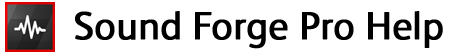
<style>
.page{position:relative;width:462px;height:54px;background:#ffffff}
.page>*{position:absolute;margin:0}
.t1{font:39.1px "FSAlbertPro";color:#000000;font-weight:bold}
</style>
<div class="page">
<p class="t1" style="left:75px;top:11px;width:368px;height:38px">Sound Forge Pro Help</p>
</div>
